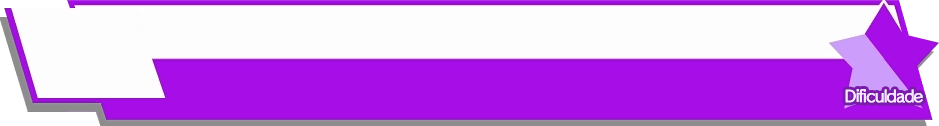
<style>
.page{position:relative;width:939px;height:126px;background:#fefdfe}
.page>*{position:absolute;margin:0}
.t1{font:16px "RodinPro-M";letter-spacing:-0.06em;color:#f7e6ff;font-weight:bold}
</style>
<div class="page">
<p class="t1" style="left:845px;top:89px;width:78px;height:14px">Dificuldade</p>
</div>
